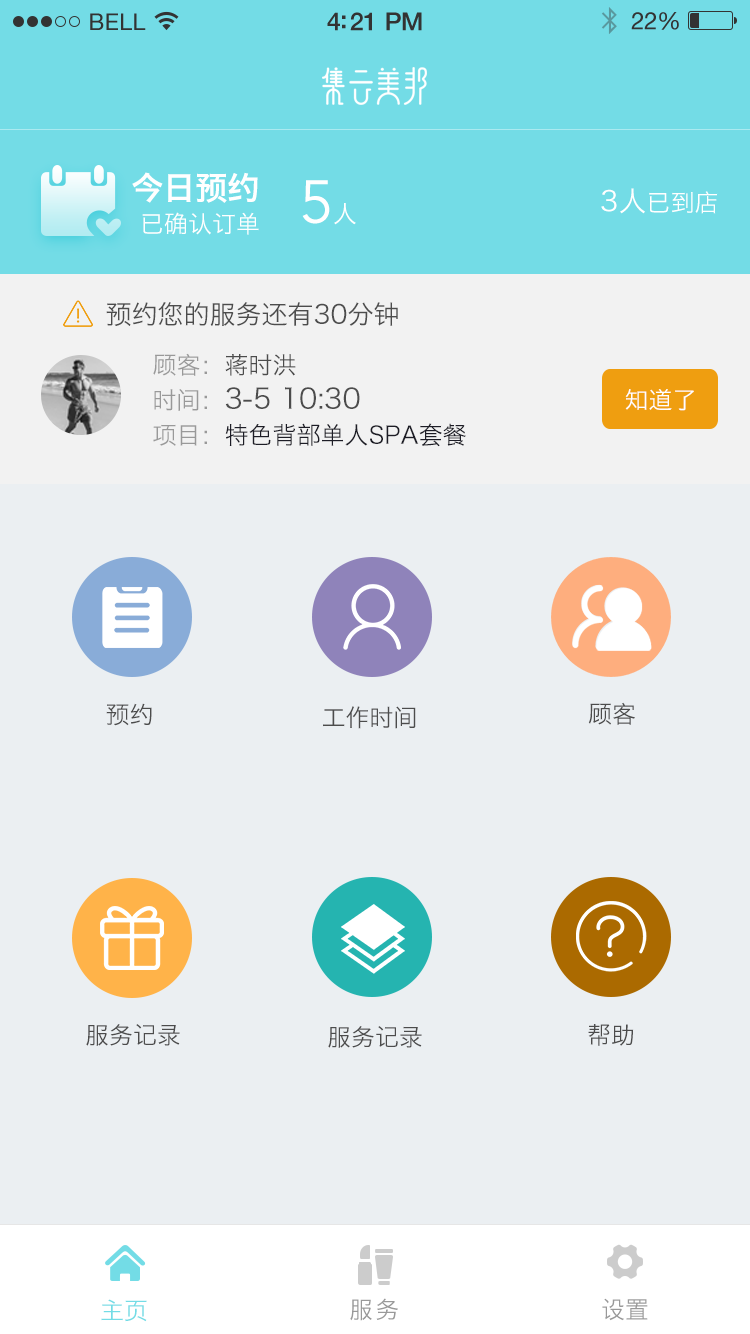
<style>
.page{position:relative;width:750px;height:1334px;background:#ebeff2}
.page>*{position:absolute;margin:0}
.t1{font:32px "HiraginoSansGB-W6";color:#ffffff}
.t2{font:60px "Avenir-Book";color:#ffffff}
.t3{font:24px "HiraginoSansGB-W3";color:#ffffff}
.t4{font:28px "HiraginoSansGB-W3";color:#ffffff}
.t5{font:26px "HiraginoSansGB-W3";color:#4c4c4c}
.t6{font:24px/35px "HiraginoSansGB-W3";color:#1d1d26}
.t7{font:24px/35px "HiraginoSansGB-W3";color:#999999}
.t8{font:24px/35px "HiraginoSansGB-W3";color:#4c4c4c}
.t9{font:28px/35px "HiraginoSansGB-W3";color:#4c4c4c}
.t10{font:24px "HiraginoSansGB-W3";color:#4c4c4c}
.t11{font:24px "HiraginoSansGB-W3";color:#73dce6}
.t12{font:24px "HiraginoSansGB-W3";letter-spacing:0.1em;color:#999999}
.t13{font:24px "HiraginoSansGB-W3";color:#999999}
</style>
<div class="page">
<p class="t1" style="left:132px;top:172px;width:126px;height:31px">今日预约</p>
<p class="t2" style="left:302px;top:180px;width:54px;height:45px">5<span class="t3">人</span></p>
<p class="t3" style="left:601px;top:188px;width:117px;height:26px"><span class="t4">3人</span>已到店</p>
<p class="t3" style="left:142px;top:212px;width:117px;height:23px">已确认订单</p>
<p class="t5" style="left:106px;top:302px;width:292px;height:24px">预约您的服务还有30分钟</p>
<p class="t6" style="left:153px;top:353px;width:313px;height:94px"><span class="t7">顾客：</span><span class="t8">蒋时洪<br></span><span class="t7">时间：</span><span class="t9">3-5 10:30<br></span><span class="t7">项目：</span>特色背部单人SPA套餐</p>
<p class="t3" style="left:625px;top:389px;width:69px;height:22px">知道了</p>
<p class="t10" style="left:588px;top:702px;width:47px;height:23px">顾客</p>
<p class="t10" style="left:106px;top:703px;width:46px;height:23px">预约</p>
<p class="t10" style="left:323px;top:706px;width:93px;height:23px">工作时间</p>
<p class="t10" style="left:86px;top:1024px;width:94px;height:22px">服务记录</p>
<p class="t10" style="left:588px;top:1024px;width:46px;height:22px">帮助</p>
<p class="t10" style="left:328px;top:1026px;width:94px;height:22px">服务记录</p>
<p class="t11" style="left:101px;top:1299px;width:46px;height:23px">主页</p>
<p class="t12" style="left:350px;top:1298px;width:48px;height:23px">服务</p>
<p class="t13" style="left:602px;top:1298px;width:46px;height:23px">设置</p>
</div>
